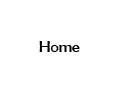
<style>
.page{position:relative;width:126px;height:95px;background:#ffffff}
.page>*{position:absolute;margin:0}
.t1{font:16px "BerlinSansFB-Reg";color:#000000}
</style>
<div class="page">
<p class="t1" style="left:39px;top:41px;width:41px;height:11px">Home</p>
</div>
